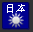
<style>
.page{position:relative;width:33px;height:32px;background:#000090}
.page>*{position:absolute;margin:0}
.t1{font:10.4px "SimSun";color:#ffffff}
</style>
<div class="page">
<p class="t1" style="left:7px;top:4px;width:18px;height:9px">日本</p>
</div>
